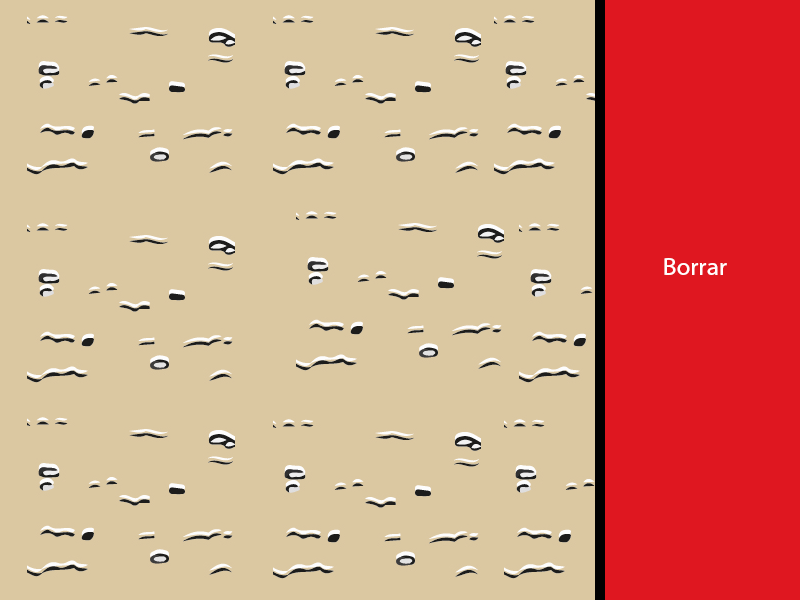
<style>
.page{position:relative;width:800px;height:600px;background:#dbc8a1}
.page>*{position:absolute;margin:0}
.t1{font:25px "MyriadHebrew-Regular";color:#ffffff}
</style>
<div class="page">
<p class="t1" style="left:664px;top:258px;width:63px;height:17px">Borrar</p>
</div>
